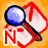
<style>
.page{position:relative;width:48px;height:48px}
.page>*{position:absolute;margin:0}
.t1{font:18px "ZeroThrees";color:#ff0000}
</style>
<div class="page">
<p class="t1" style="left:5px;top:30px;width:11px;height:14px">N</p>
</div>
